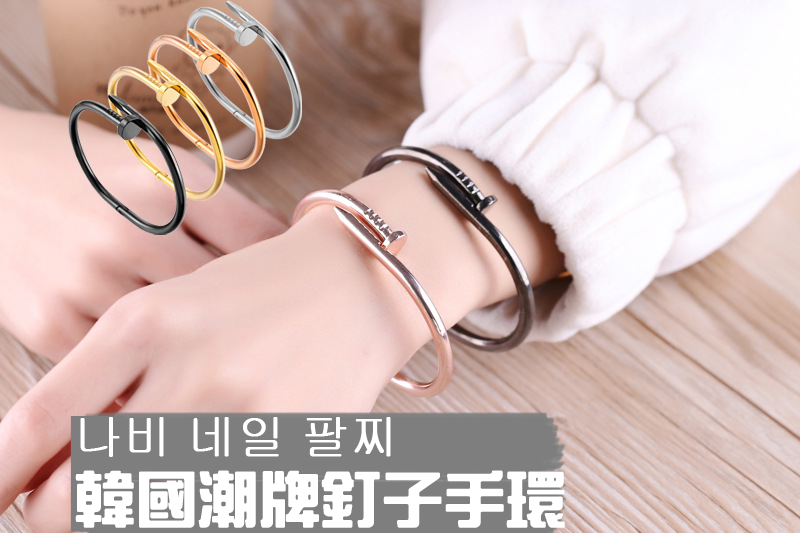
<style>
.page{position:relative;width:800px;height:533px}
.page>*{position:absolute;margin:0}
.t1{font:48px "Gulim";color:#ffffff;font-weight:bold}
.t2{font:60px "HanWangZonYi";color:#ffffff;font-weight:bold}
</style>
<div class="page">
<p class="t1" style="left:75px;top:417px;width:490px;height:111px">나비 네일 팔찌<br><span class="t2">韓國潮牌釘子手環</span></p>
</div>
